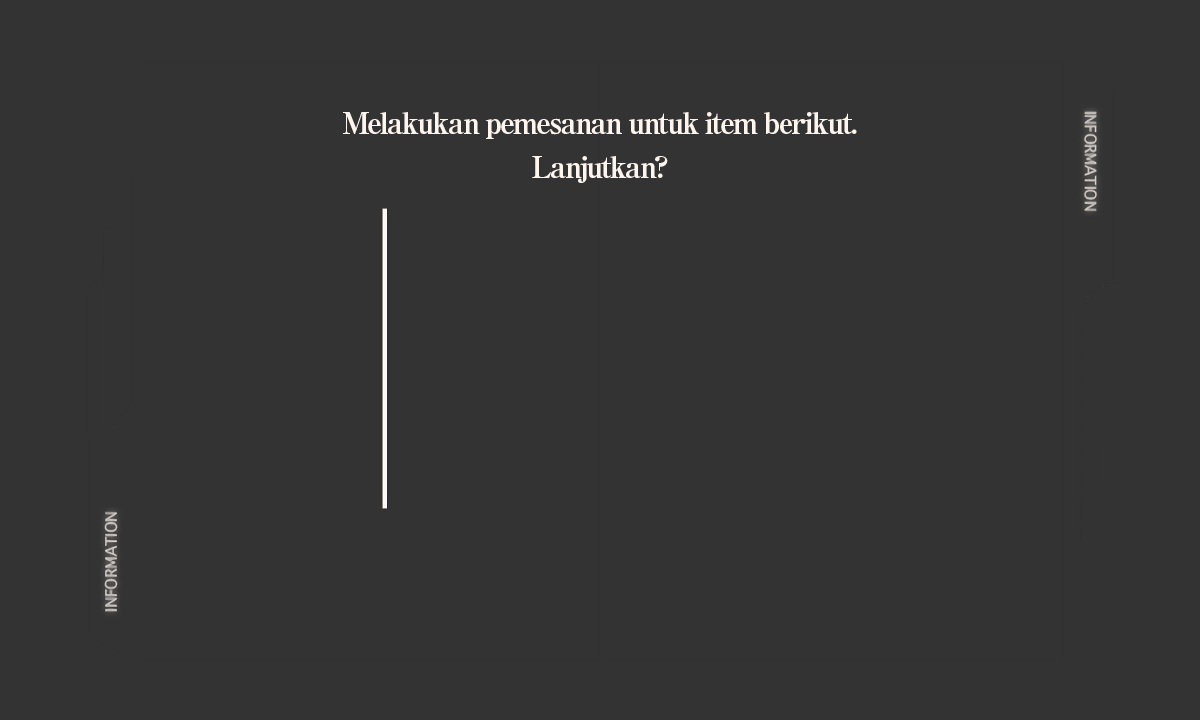
<style>
.page{position:relative;width:1200px;height:720px;background:#333333}
.page>*{position:absolute;margin:0}
.t1{font:30px/44px "RyuminPro-ExBold";letter-spacing:-0.08em;color:#fff5ef}
</style>
<div class="page">
<p class="t1" style="left:343px;top:112px;width:514px;height:71px;text-align:center">Melakukan pemesanan untuk item berikut.<br>Lanjutkan?</p>
</div>
